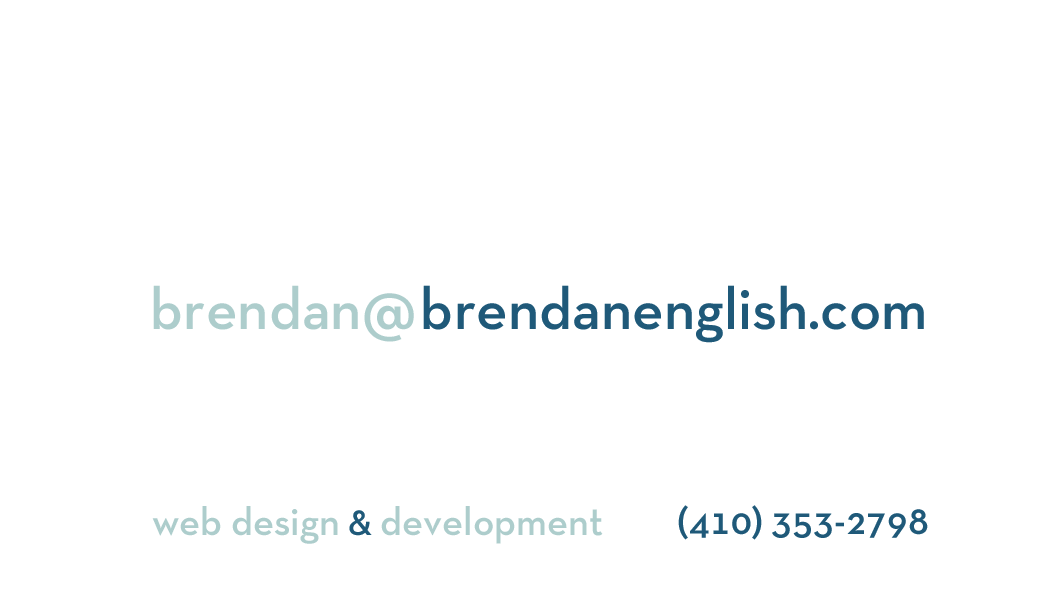
<style>
.page{position:relative;width:1062px;height:615px;background:#ffffff}
.page>*{position:absolute;margin:0}
.t1{font:60px "NeutraTextTF-Demi";color:#adcdcc}
.t2{font:60px "NeutraTextTF-Demi";color:#1f5a79}
.t3{font:40px "NeutraTextTF-Demi";color:#adcdcc}
.t4{font:36px "NeutraTextTF-Demi";color:#1f5979}
.t5{font:40px "NeutraTextTF-Demi";color:#1f5a79}
</style>
<div class="page">
<p class="t1" style="left:153px;top:285px;width:261px;height:57px">brendan@</p>
<p class="t2" style="left:423px;top:285px;width:501px;height:58px">brendanenglish.com</p>
<p class="t3" style="left:152px;top:506px;width:451px;height:38px">web design <span class="t4">&amp;</span> development</p>
<p class="t5" style="left:678px;top:505px;width:250px;height:35px">(410) 353-2798</p>
</div>
